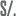
<style>
.page{position:relative;width:16px;height:16px;background:#ffffff}
.page>*{position:absolute;margin:0}
.t1{font:20px "AgencyFB-Bold";color:#646566;text-transform:uppercase;scale:0.73 1}
.t2{font:20px "AgencyFB-Bold";color:#4b4c4e;text-transform:uppercase;scale:0.73 1}
</style>
<div class="page">
<p class="t1" style="left:0px;top:0px;width:16px;height:16px">S/<span class="t2">.</span></p>
</div>
